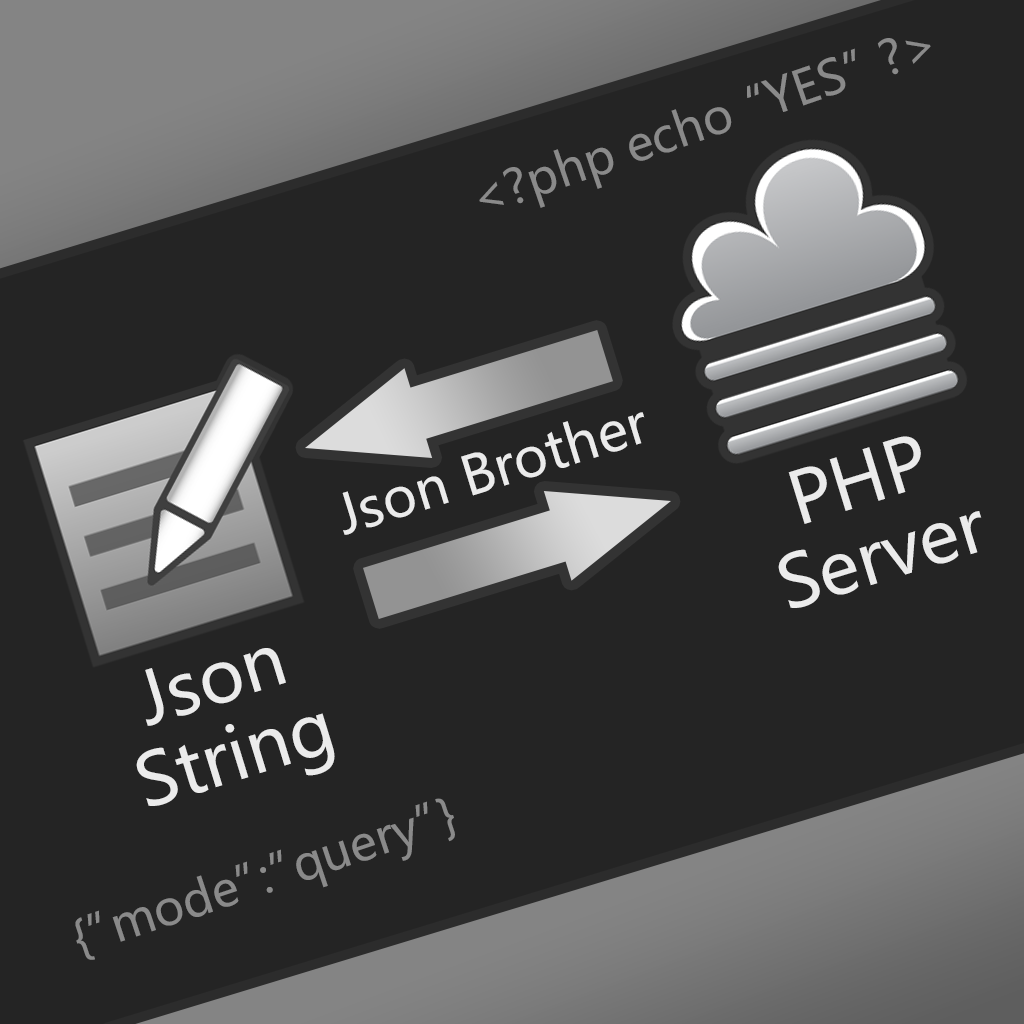
<style>
.page{position:relative;width:1024px;height:1024px;background:#242424}
.page>*{position:absolute;margin:0}
.t1{font:53.7px "MicrosoftYaHei";color:#ebebeb}
.t2{font:71.3px/78.5px "MicrosoftYaHei";color:#ebebeb}
.t3{font:47.6px "MicrosoftYaHei";color:#8a8a8a}
</style>
<div class="page">
<p class="t1" style="left:342px;top:412px;width:303px;height:123px;rotate:-17deg">Json Brother</p>
<p class="t2" style="left:778px;top:436px;width:204px;height:172px;text-align:center;rotate:-17deg">PHP<br>Server</p>
<p class="t2" style="left:136px;top:648px;width:199px;height:158px;text-align:center;rotate:-17deg">Json<br>String</p>
<p class="t3" style="left:75px;top:798px;width:380px;height:162px;rotate:-18deg">{”mode”:”query”}</p>
</div>
